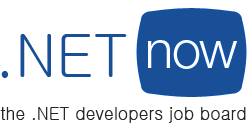
<style>
.page{position:relative;width:247px;height:126px;background:#ffffff}
.page>*{position:absolute;margin:0}
.t1{font:59.5px "Gulim";color:#184f96}
.t2{font:18.2px "Gulim";color:#252525;scale:0.95 1}
</style>
<div class="page">
<p class="t1" style="left:1px;top:34px;width:126px;height:44px">.NET</p>
<p class="t2" style="left:0px;top:107px;width:246px;height:16px">the .NET developers job board</p>
</div>
